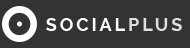
<style>
.page{position:relative;width:190px;height:48px;background:#333333}
.page>*{position:absolute;margin:0}
.t1{font:18px "Raleway-Bold";letter-spacing:0.162em;color:#ffffff}
.t2{font:18px "Raleway-Bold";letter-spacing:0.162em;color:#dfdfdf}
</style>
<div class="page">
<p class="t1" style="left:46px;top:18px;width:136px;height:13px">SOCIAL<span class="t2">PLUS</span></p>
</div>
